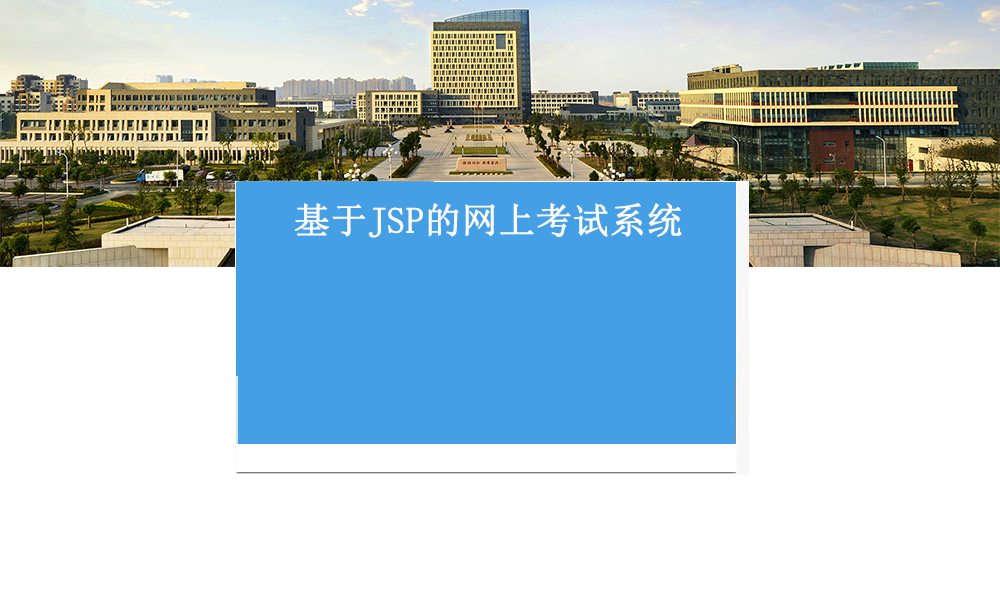
<style>
.page{position:relative;width:1000px;height:600px;background:#ffffff}
.page>*{position:absolute;margin:0}
.t1{font:36px "NSimSun";color:#f9fbfc;font-weight:bold}
</style>
<div class="page">
<p class="t1" style="left:294px;top:203px;width:388px;height:35px">基于JSP的网上考试系统</p>
</div>
